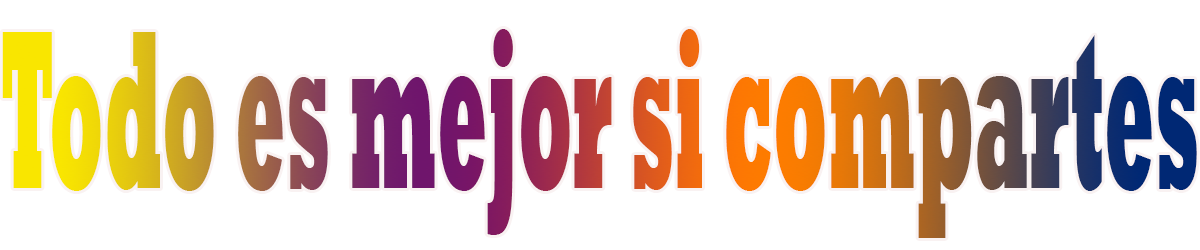
<style>
.page{position:relative;width:1200px;height:250px;background:#ffffff}
.page>*{position:absolute;margin:0}
.t1{font:229.8px "Rockwell-ExtraBold";scale:0.32 1}
</style>
<div class="page">
<p class="t1" style="left:2px;top:29px;width:1195px;height:209px">Todo es mejor si compartes</p>
</div>
